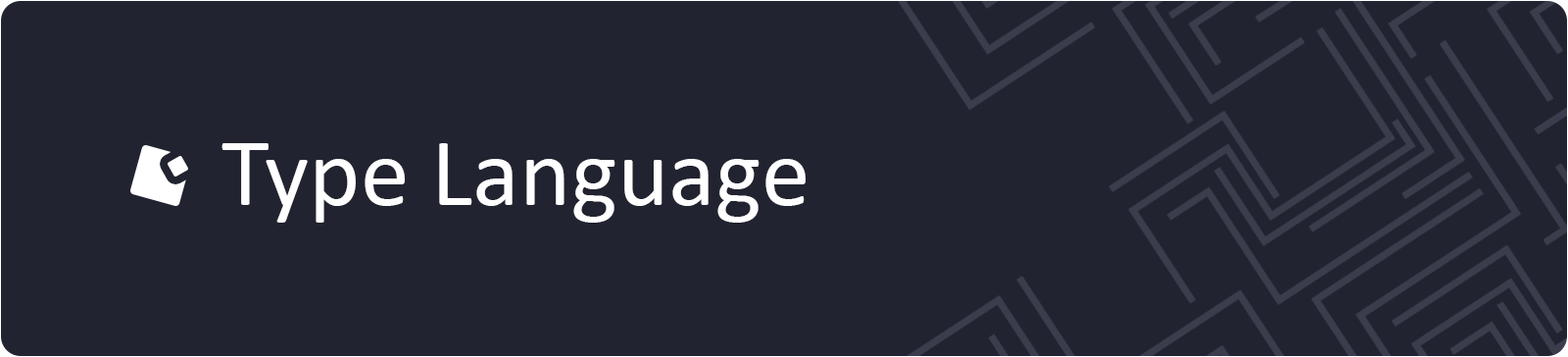
<style>
.page{position:relative;width:1568px;height:357px;background:#222330}
.page>*{position:absolute;margin:0}
.t1{font:98px "Calibri";color:#ffffff}
</style>
<div class="page">
<p class="t1" style="left:221px;top:143px;width:585px;height:79px">Type Language</p>
</div>
